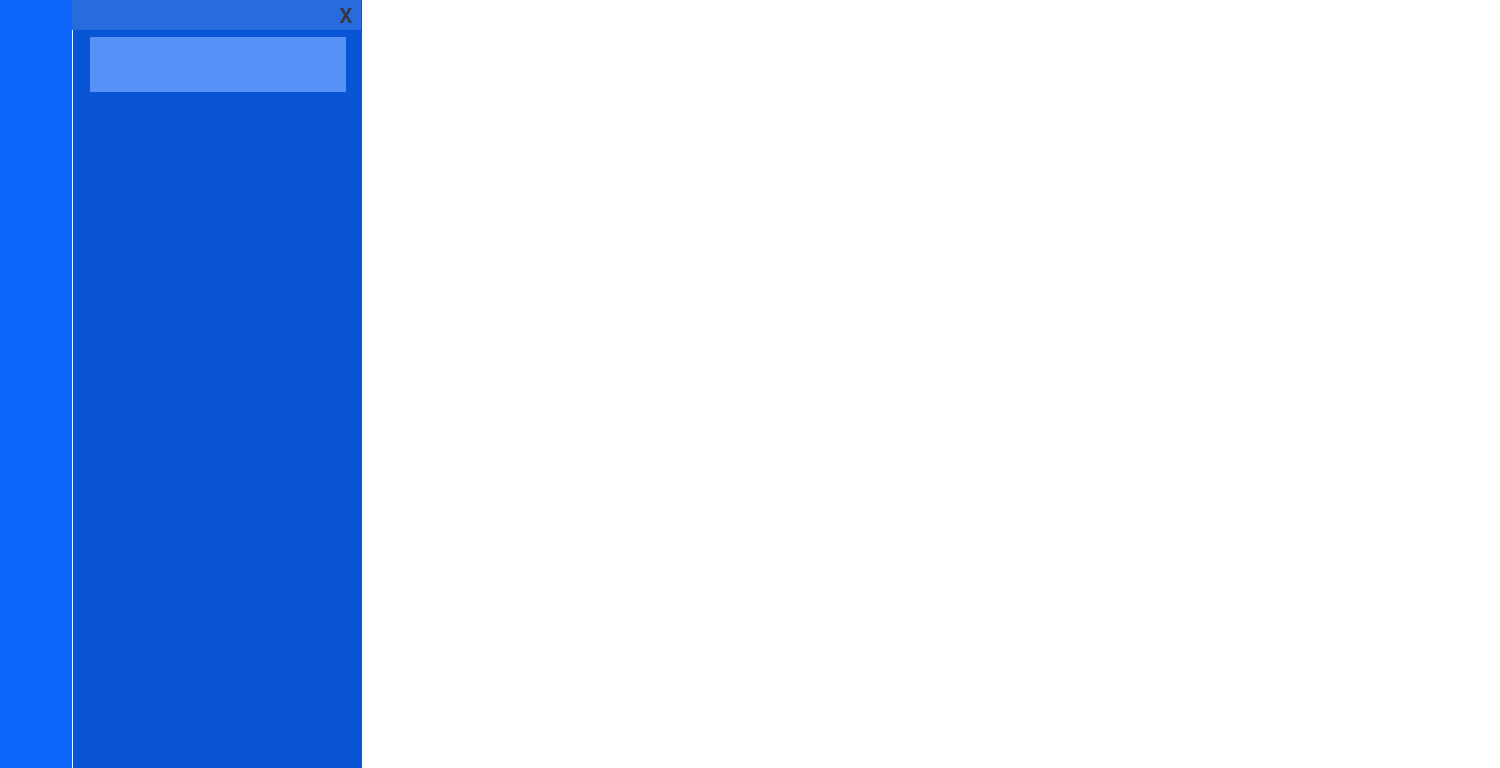
<style>
.page{position:relative;width:1500px;height:768px;background:#ffffff}
.page>*{position:absolute;margin:0}
.t1{font:20px "Helvetica-Bold";color:#383838}
</style>
<div class="page">
<p class="t1" style="left:339px;top:8px;width:14px;height:15px">X</p>
</div>
